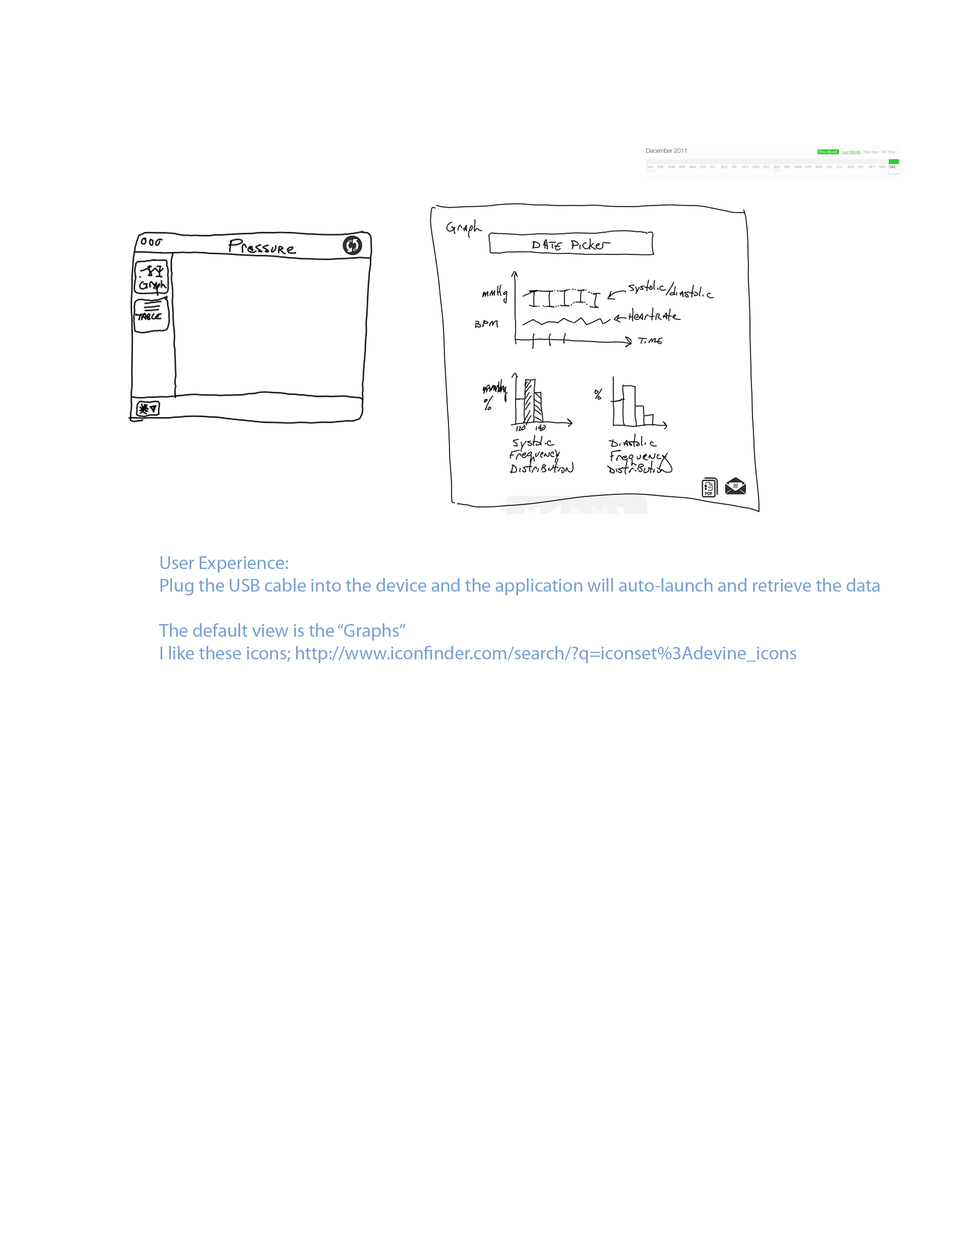
<style>
.page{position:relative;width:960px;height:1242px;background:#ffffff}
.page>*{position:absolute;margin:0}
.t1{font:18.8px "MyriadPro-Regular";color:#7aa0d1}
</style>
<div class="page">
<p class="t1" style="left:159px;top:556px;width:721px;height:107px">User Experience:<br>Plug the USB cable into the device and the application will auto-launch and retrieve the data<br><br>The default view is the “Graphs”<br>I like these icons; http://www.iconfinder.com/search/?q=iconset%3Adevine_icons</p>
</div>
